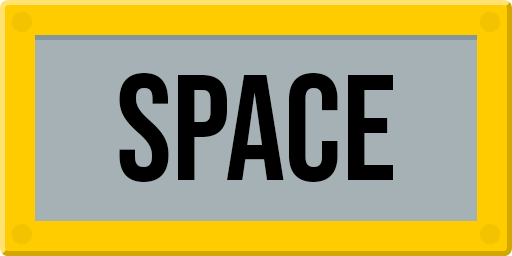
<style>
.page{position:relative;width:512px;height:256px;background:#a5b1b4}
.page>*{position:absolute;margin:0}
.t1{font:150px "BebasNeue-Regular";color:#000000}
</style>
<div class="page">
<p class="t1" style="left:119px;top:73px;width:274px;height:109px">Space</p>
</div>
